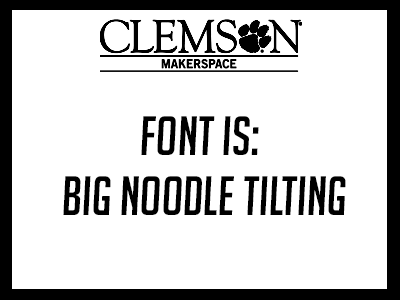
<style>
.page{position:relative;width:400px;height:300px;background:#ffffff}
.page>*{position:absolute;margin:0}
.t1{font:54px/60px "BigNoodleTitling-Oblique";color:#000000}
</style>
<div class="page">
<p class="t1" style="left:63px;top:116px;width:283px;height:99px;text-align:center">font is:<br> big noodle tilting</p>
</div>
